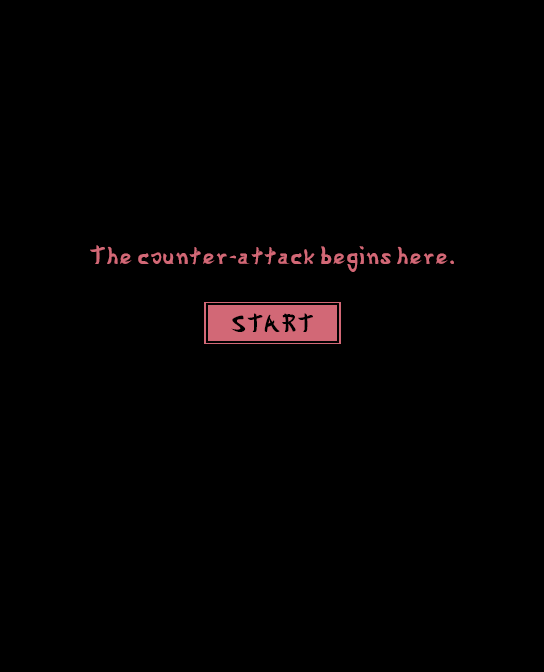
<style>
.page{position:relative;width:544px;height:672px;background:#000000}
.page>*{position:absolute;margin:0}
.t1{font:24px "Gyosho";color:#d26876}
.t2{font:24px "Gyosho";color:#000000}
</style>
<div class="page">
<p class="t1" style="left:90px;top:245px;width:364px;height:27px">The counter-attack begins here.</p>
<p class="t2" style="left:231px;top:313px;width:82px;height:19px">START</p>
</div>
